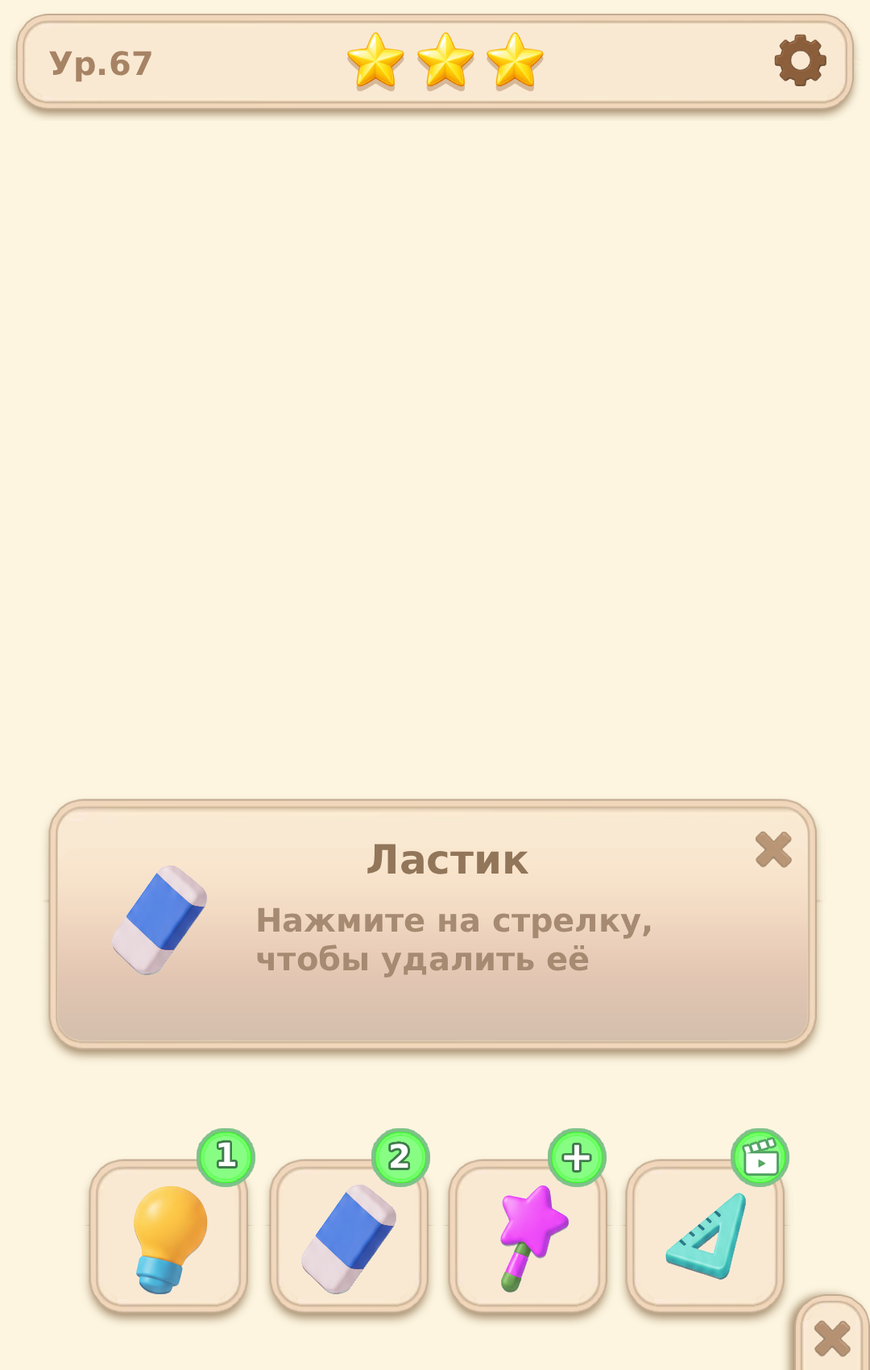
<style>
.page{position:relative;width:870px;height:1370px;background:#fdf5e0}
.page>*{position:absolute;margin:0}
.t1{font:32.2px "DejaVuSans-Bold";color:#a78365}
.t2{font:40.3px "DejaVuSans-Bold";color:#92765a}
.t3{font:32.2px "DejaVuSans-Bold";color:#a68a71}
.t4{font:32.2px "DejaVuSans-Bold";color:#ffffff}
.t5{font:40.3px "DejaVuSans-Bold";color:#ffffff}
</style>
<div class="page">
<p class="t1" style="left:49px;top:51px;width:103px;height:31px">Ур.67</p>
<p class="t2" style="left:367px;top:844px;width:162px;height:30px">Ластик</p>
<p class="t3" style="left:257px;top:907px;width:394px;height:71px">Нажмите на стрелку, <br>чтобы удалить её</p>
<p class="t4" style="left:218px;top:1142px;width:18px;height:24px">1</p>
<p class="t4" style="left:391px;top:1144px;width:18px;height:24px">2</p>
<p class="t5" style="left:564px;top:1144px;width:26px;height:26px">+</p>
</div>
